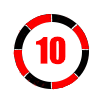
<style>
.page{position:relative;width:103px;height:103px;background:#ffffff}
.page>*{position:absolute;margin:0}
.t1{font:33.3px "Impact";color:#ff0000}
</style>
<div class="page">
<p class="t1" style="left:36px;top:36px;width:30px;height:29px">10</p>
</div>
